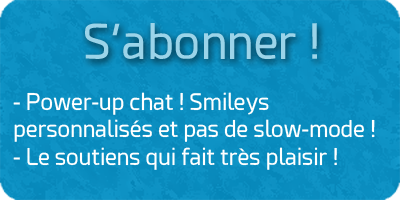
<style>
.page{position:relative;width:400px;height:200px}
.page>*{position:absolute;margin:0}
.t1{font:48px "Esphimere";color:#9bd4e9}
.t2{font:22.7px "Esphimere";color:#ffffff}
</style>
<div class="page">
<p class="t1" style="left:85px;top:23px;width:232px;height:36px">S’abonner !</p>
<p class="t2" style="left:13px;top:92px;width:362px;height:78px">- Power-up chat ! Smileys personnalisés et pas de slow-mode !   - Le soutiens qui fait très plaisir !</p>
</div>
